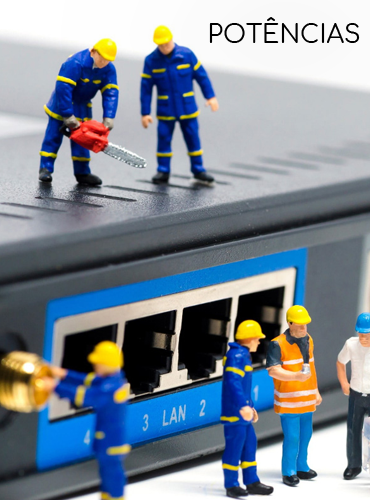
<style>
.page{position:relative;width:370px;height:500px}
.page>*{position:absolute;margin:0}
.t1{font:25px "Comfortaa-Regular";color:#000000}
</style>
<div class="page">
<p class="t1" style="left:209px;top:17px;width:151px;height:26px">POTÊNCIAS</p>
</div>
